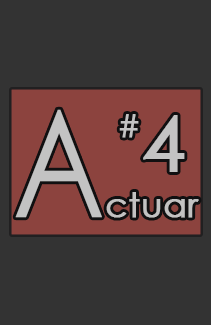
<style>
.page{position:relative;width:211px;height:325px;background:#333333}
.page>*{position:absolute;margin:0}
.t1{font:149.2px "CenturyGothic";color:#c3c3c3;font-weight:bold;scale:0.83 1}
.t2{font:31.5px "CenturyGothic";color:#c3c3c3;font-weight:bold}
.t3{font:77.5px "CenturyGothic";color:#c3c3c3;font-weight:bold}
.t4{font:34.5px "CenturyGothic";color:#c3c2c2;font-weight:bold}
</style>
<div class="page">
<p class="t1" style="left:15px;top:109px;width:87px;height:109px">A</p>
<p class="t2" style="left:119px;top:114px;width:20px;height:24px">#</p>
<p class="t3" style="left:143px;top:115px;width:42px;height:57px">4</p>
<p class="t4" style="left:106px;top:192px;width:93px;height:26px">ctuar</p>
</div>
